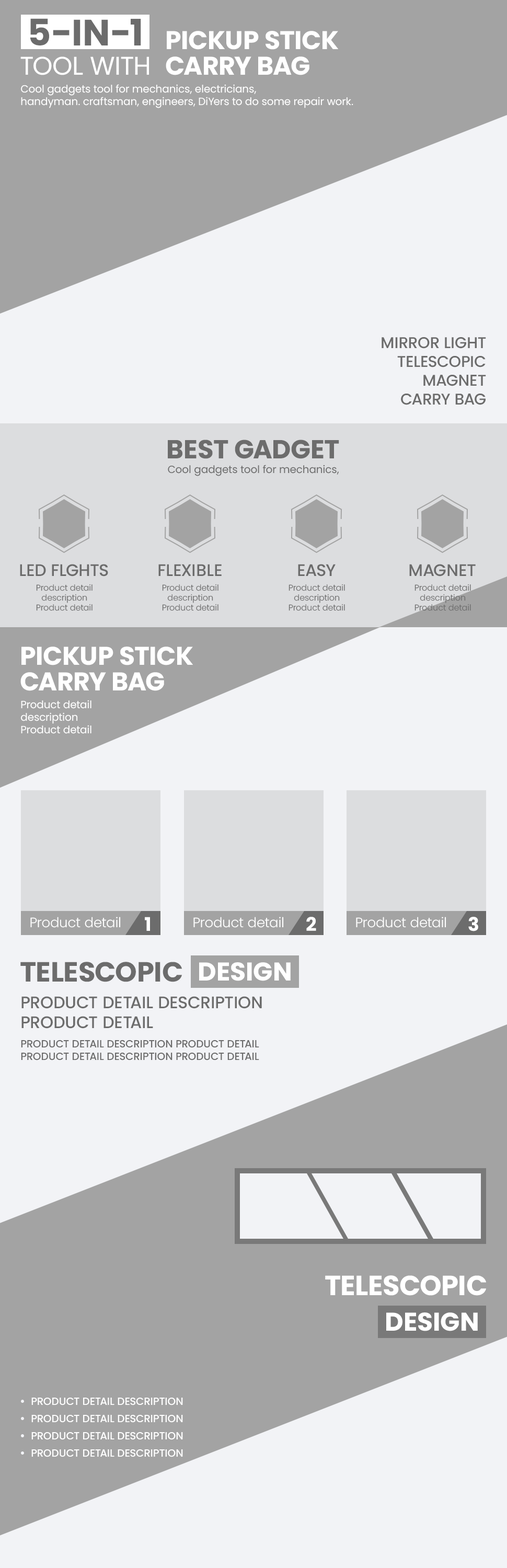
<style>
.page{position:relative;width:507px;height:1568px;background:#f2f3f6}
.page>*{position:absolute;margin:0}
.t1{font:36.6px "Poppins-Bold";color:#6c6c6c;text-transform:uppercase}
.t2{font:25.6px/25.6px "Poppins-Bold";color:#ffffff;text-transform:uppercase}
.t3{font:25.6px "Poppins-Regular";color:#ffffff;text-transform:uppercase}
.t4{font:10.5px "Poppins-Regular";color:#ffffff}
.t5{font:15.7px "Poppins-Medium";color:#6c6c6c}
.t6{font:26.1px "Poppins-Bold";color:#6c6c6c}
.t7{font:10.5px "Poppins-Regular";color:#6c6c6c}
.t8{font:16.7px "Poppins-Medium";color:#6c6c6c}
.t9{font:8.4px "Poppins-Light";color:#6c6c6c}
.t10{font:13.6px "Poppins-Light";color:#ffffff}
.t11{font:18.8px "Poppins-Bold";color:#ffffff}
.t12{font:27.7px "Poppins-Bold";color:#6c6c6c;text-transform:uppercase}
.t13{font:25.6px "Poppins-Bold";color:#ffffff;text-transform:uppercase}
.t14{font:16.7px "Poppins-Medium";color:#6c6c6c;text-transform:uppercase}
.t15{font:10.5px "Poppins-Medium";color:#6c6c6c;text-transform:uppercase}
.t16{font:27.7px "Poppins-Bold";color:#ffffff;text-transform:uppercase}
.t17{font:10.5px "Poppins-Medium";color:#ffffff;text-transform:uppercase}
</style>
<div class="page">
<p class="t1" style="left:30px;top:18px;width:111px;height:27px">5-IN-1</p>
<p class="t2" style="left:166px;top:31px;width:172px;height:44px">PICKUP STICK<br>CARRY BAG</p>
<p class="t3" style="left:20px;top:56px;width:129px;height:19px">TOOL WITH</p>
<p class="t4" style="left:21px;top:84px;width:332px;height:24px">Cool gadgets tool for mechanics, electricians, <br>handyman. craftsman, engineers, DiYers to do some repair work.</p>
<p class="t5" style="left:382px;top:337px;width:104px;height:68px;text-align:right">MIRROR LIGHT<br>TELESCOPIC<br>MAGNET<br>CARRY BAG</p>
<p class="t6" style="left:168px;top:440px;width:171px;height:19px">BEST GADGET</p>
<p class="t7" style="left:168px;top:465px;width:171px;height:11px">Cool gadgets tool for mechanics,</p>
<p class="t8" style="left:20px;top:564px;width:88px;height:13px">LED FLGHTS</p>
<p class="t8" style="left:158px;top:564px;width:64px;height:12px">FLEXIBLE</p>
<p class="t8" style="left:298px;top:564px;width:38px;height:13px">EASY</p>
<p class="t8" style="left:409px;top:564px;width:67px;height:13px">MAGNET</p>
<p class="t9" style="left:36px;top:584px;width:57px;height:27px;text-align:center">Product detail<br>description<br>Product detail</p>
<p class="t9" style="left:162px;top:584px;width:56px;height:27px;text-align:center">Product detail<br>description<br>Product detail</p>
<p class="t9" style="left:289px;top:584px;width:56px;height:27px;text-align:center">Product detail<br>description<br>Product detail</p>
<p class="t9" style="left:414px;top:584px;width:57px;height:27px;text-align:center">Product detail<br>description<br>Product detail</p>
<p class="t2" style="left:20px;top:647px;width:173px;height:44px">PICKUP STICK<br>CARRY BAG</p>
<p class="t4" style="left:20px;top:700px;width:71px;height:34px">Product detail<br>description<br>Product detail</p>
<p class="t10" style="left:30px;top:917px;width:91px;height:11px">Product detail</p>
<p class="t11" style="left:145px;top:917px;width:5px;height:14px">1</p>
<p class="t10" style="left:193px;top:917px;width:91px;height:11px">Product detail</p>
<p class="t11" style="left:306px;top:917px;width:10px;height:14px">2</p>
<p class="t10" style="left:356px;top:917px;width:90px;height:11px">Product detail</p>
<p class="t11" style="left:468px;top:917px;width:10px;height:14px">3</p>
<p class="t12" style="left:20px;top:962px;width:162px;height:20px">TELESCOPIC</p>
<p class="t13" style="left:199px;top:962px;width:92px;height:19px">DESIGN</p>
<p class="t14" style="left:21px;top:996px;width:241px;height:33px">Product detail description<br>Product detail</p>
<p class="t15" style="left:21px;top:1040px;width:238px;height:20px">Product detail description Product detail<br>Product detail description Product detail</p>
<p class="t16" style="left:325px;top:1275px;width:161px;height:21px">TELESCOPIC</p>
<p class="t13" style="left:386px;top:1312px;width:92px;height:19px">DESIGN</p>
<p class="t17" style="left:31px;top:1398px;width:152px;height:7px">Product detail description</p>
<p class="t17" style="left:31px;top:1415px;width:152px;height:8px">Product detail description</p>
<p class="t17" style="left:31px;top:1432px;width:152px;height:8px">Product detail description</p>
<p class="t17" style="left:31px;top:1449px;width:152px;height:8px">Product detail description</p>
</div>
